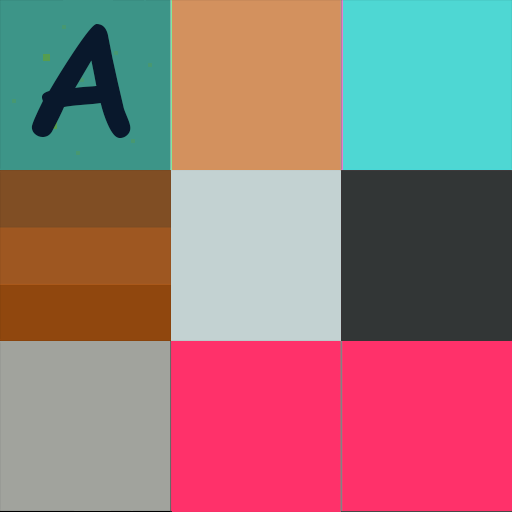
<style>
.page{position:relative;width:512px;height:512px;background:#ff316a}
.page>*{position:absolute;margin:0}
.t1{font:154.8px "ComicSansMS-Bold";color:#09182c}
</style>
<div class="page">
<p class="t1" style="left:31px;top:24px;width:100px;height:114px">A</p>
</div>
